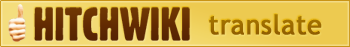
<style>
.page{position:relative;width:350px;height:47px}
.page>*{position:absolute;margin:0}
.t1{font:45.7px "Gothic821CondensedBT-Regular";color:#632b02;text-transform:uppercase}
.t2{font:26.8px "TrebuchetMS";color:#9d6b00;font-weight:bold}
</style>
<div class="page">
<p class="t1" style="left:34px;top:7px;width:156px;height:34px">Hitchwiki</p>
<p class="t2" style="left:209px;top:14px;width:113px;height:21px">translate</p>
</div>
